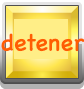
<style>
.page{position:relative;width:84px;height:89px;background:#ffee87}
.page>*{position:absolute;margin:0}
.t1{font:24px "ChalkboardSE-Regular";color:#ff5e02}
</style>
<div class="page">
<p class="t1" style="left:1px;top:33px;width:84px;height:19px">detener</p>
</div>
